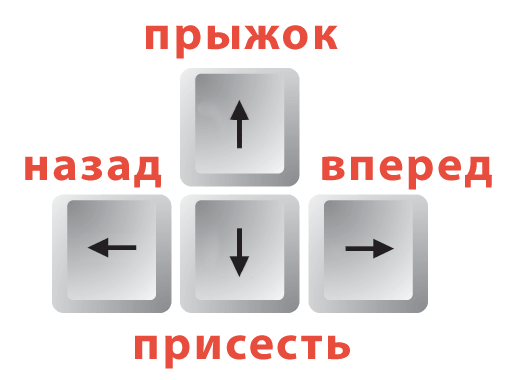
<style>
.page{position:relative;width:510px;height:380px;background:#ffffff}
.page>*{position:absolute;margin:0}
.t1{font:48px "MyriadPro-Bold";letter-spacing:0.05em;color:#e74c3c}
</style>
<div class="page">
<p class="t1" style="left:146px;top:25px;width:192px;height:34px">прыжок</p>
<p class="t1" style="left:25px;top:156px;width:137px;height:32px">назад</p>
<p class="t1" style="left:322px;top:156px;width:170px;height:34px">вперед</p>
</div>
